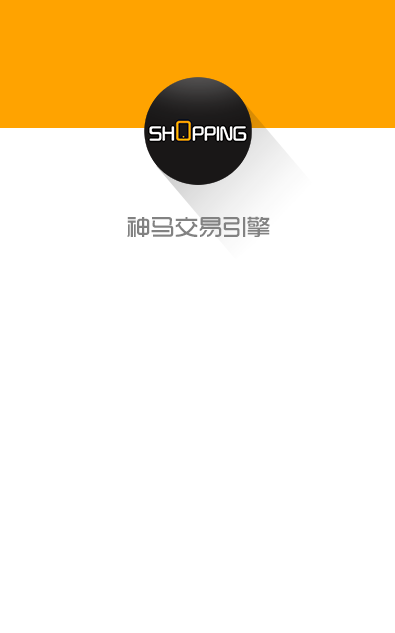
<style>
.page{position:relative;width:395px;height:633px;background:#ffffff}
.page>*{position:absolute;margin:0}
.t1{font:24px "ShiShangZhongHei";color:#828282}
</style>
<div class="page">
<p class="t1" style="left:127px;top:216px;width:143px;height:21px">神马交易引擎</p>
</div>
